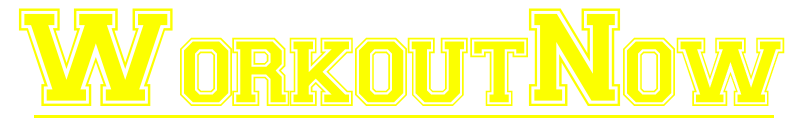
<style>
.page{position:relative;width:800px;height:134px;background:#ffffff}
.page>*{position:absolute;margin:0}
.t1{font:139.2px "Varsity-Regular";letter-spacing:-0.04em;color:#fcff00;font-variant:small-caps}
</style>
<div class="page">
<p class="t1" style="left:18px;top:8px;width:767px;height:98px">WorkoutNow</p>
</div>
